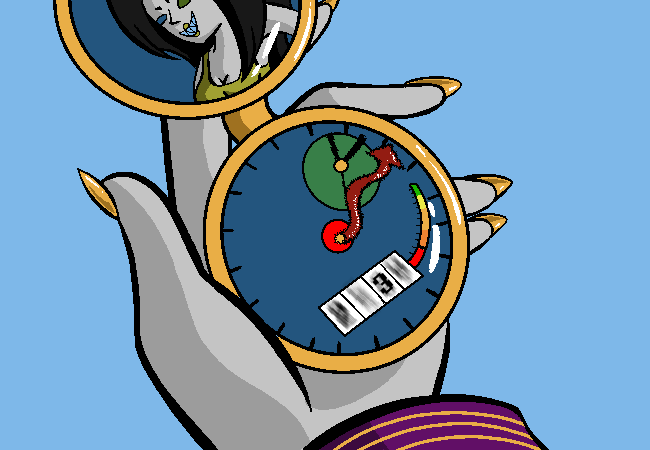
<style>
.page{position:relative;width:650px;height:450px;background:#7eb8e9}
.page>*{position:absolute;margin:0}
.t1{font:29.2px "Fixedsys";color:#000000}
</style>
<div class="page">
<p class="t1" style="left:372px;top:272px;width:22px;height:22px;rotate:-42deg">3</p>
</div>
